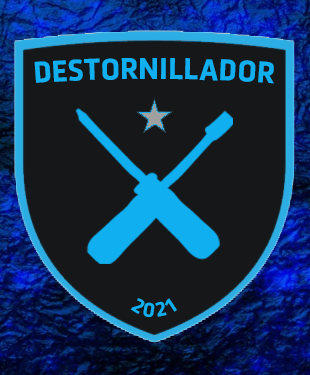
<style>
.page{position:relative;width:310px;height:375px;background:#161719}
.page>*{position:absolute;margin:0}
.t1{font:30px "Urfa-Bold";color:#10aff0}
.t2{font:20px "Urfa-Bold";letter-spacing:0.16em;color:#10aff0}
</style>
<div class="page">
<p class="t1" style="left:34px;top:58px;width:240px;height:26px">DESTORNILLADOR</p>
<p class="t2" style="left:130px;top:298px;width:47px;height:20px">2021</p>
</div>
